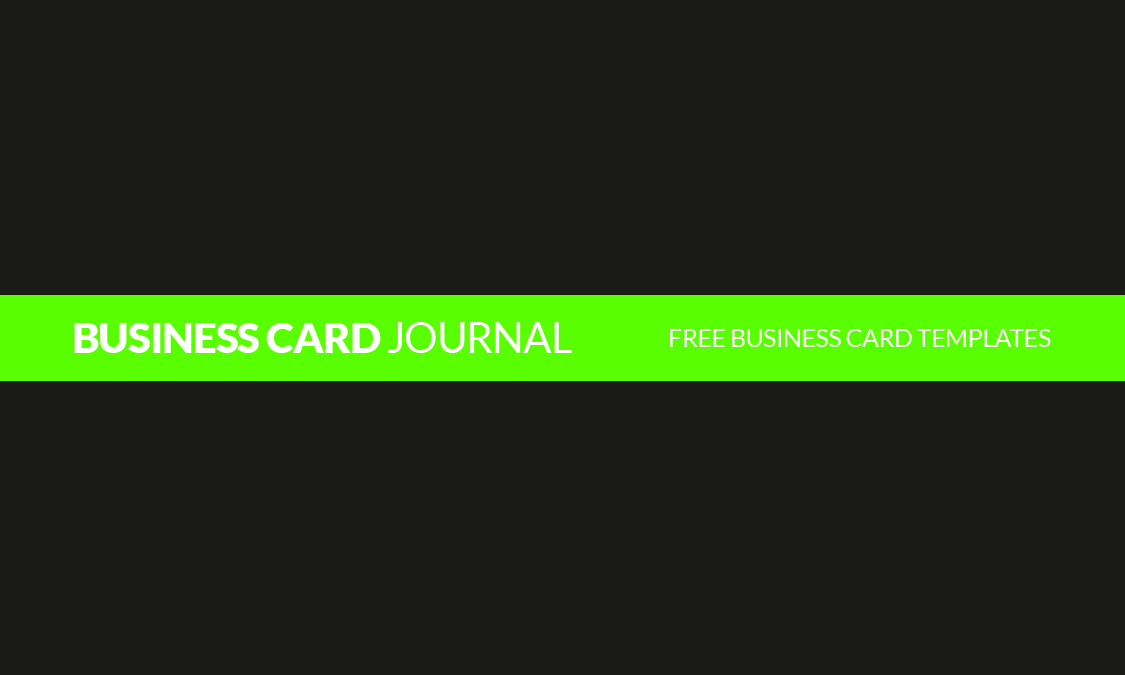
<style>
.page{position:relative;width:1125px;height:675px;background:#1a1a17}
.page>*{position:absolute;margin:0}
.t1{font:41.7px "Lato-Black";letter-spacing:-0.02em;color:#ffffff;text-transform:uppercase}
.t2{font:41.7px "Lato-Regular";letter-spacing:-0.02em;color:#ffffff;text-transform:uppercase}
.t3{font:25px "Lato-Regular";letter-spacing:-0.02em;color:#ffffff}
</style>
<div class="page">
<p class="t1" style="left:74px;top:322px;width:498px;height:31px">Business Card <span class="t2">Journal</span></p>
<p class="t3" style="left:670px;top:329px;width:381px;height:18px">FREE BUSINESS CARD TEMPLATES</p>
</div>
